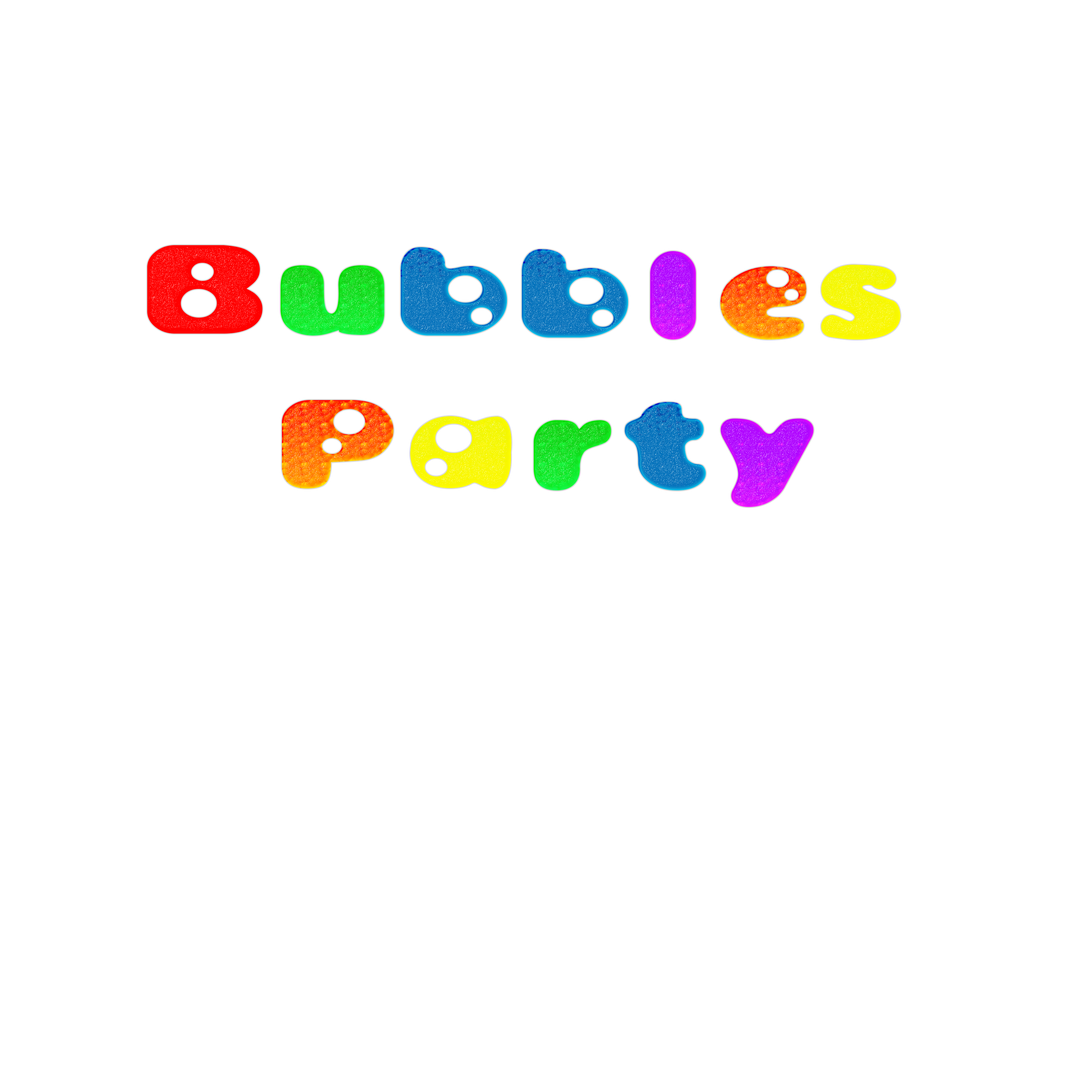
<style>
.page{position:relative;width:1092px;height:1092px;background:#ffffff}
.page>*{position:absolute;margin:0}
.t1{font:110.3px "Bambina";color:#e90000;scale:1.25 1}
.t2{font:110.3px "Bambina";scale:1.25 1}
.t3{font:110.3px "Bambina";color:#c00bff;scale:1.25 1}
.t4{font:110.3px "Bambina";color:#0fe725;scale:1.25 1}
.t5{font:110.3px "Bambina";color:#f7fa00;scale:1.25 1}
.t6{font:110.3px "Bambina";color:#0fe422;scale:1.25 1}
.t7{font:110.3px "Bambina";color:#bc0aff;scale:1.25 1}
</style>
<div class="page">
<p class="t1" style="left:147px;top:245px;width:115px;height:89px">B</p>
<p class="t2" style="left:401px;top:247px;width:106px;height:89px">b</p>
<p class="t2" style="left:522px;top:249px;width:106px;height:89px">b</p>
<p class="t3" style="left:650px;top:251px;width:46px;height:89px">l</p>
<p class="t4" style="left:281px;top:265px;width:104px;height:71px">u</p>
<p class="t2" style="left:720px;top:266px;width:86px;height:74px">e</p>
<p class="t5" style="left:821px;top:265px;width:79px;height:75px">s</p>
<p class="t2" style="left:282px;top:400px;width:112px;height:88px">P</p>
<p class="t2" style="left:624px;top:402px;width:82px;height:88px">t</p>
<p class="t5" style="left:410px;top:416px;width:102px;height:72px">a</p>
<p class="t6" style="left:534px;top:420px;width:77px;height:70px">r</p>
<p class="t7" style="left:721px;top:419px;width:93px;height:88px">y</p>
</div>
